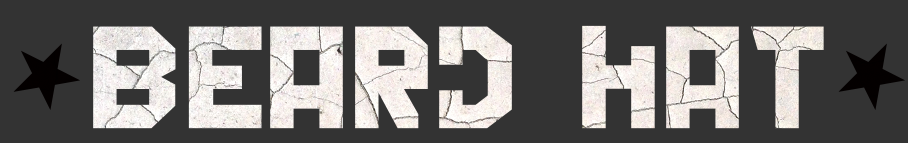
<style>
.page{position:relative;width:908px;height:143px;background:#333333}
.page>*{position:absolute;margin:0}
.t1{font:137.9px "BackInTheUSSRDL";color:#ffffff}
.t2{font:137.9px "BackInTheUSSRDL";color:#040606}
</style>
<div class="page">
<p class="t1" style="left:13px;top:25px;width:892px;height:104px"><span class="t2">=</span>Beard hat<span class="t2">=</span></p>
</div>
